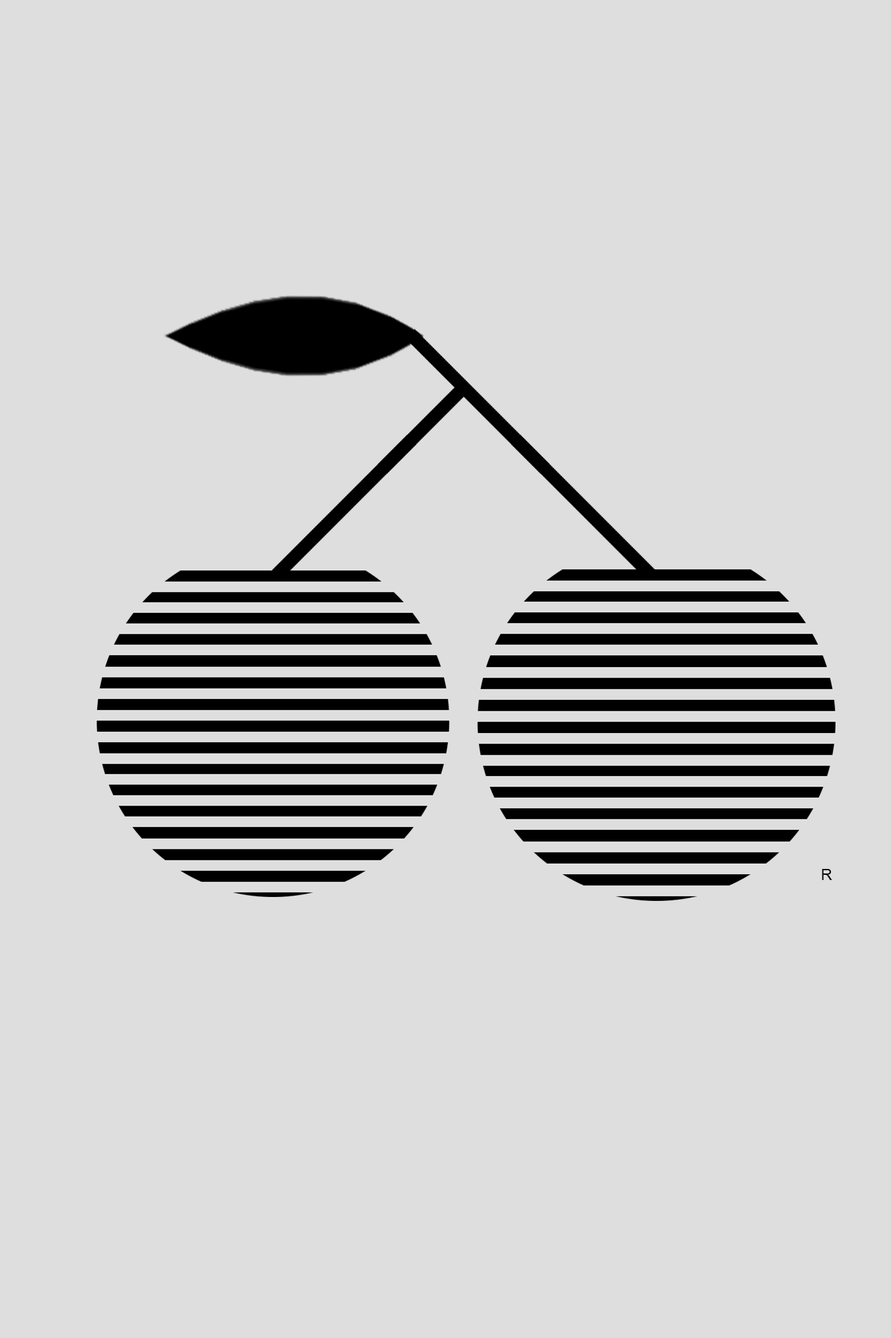
<style>
.page{position:relative;width:891px;height:1338px;background:#dedede}
.page>*{position:absolute;margin:0}
.t1{font:15.7px "ArialMT";color:#000000}
</style>
<div class="page">
<p class="t1" style="left:822px;top:869px;width:11px;height:11px">R</p>
</div>
